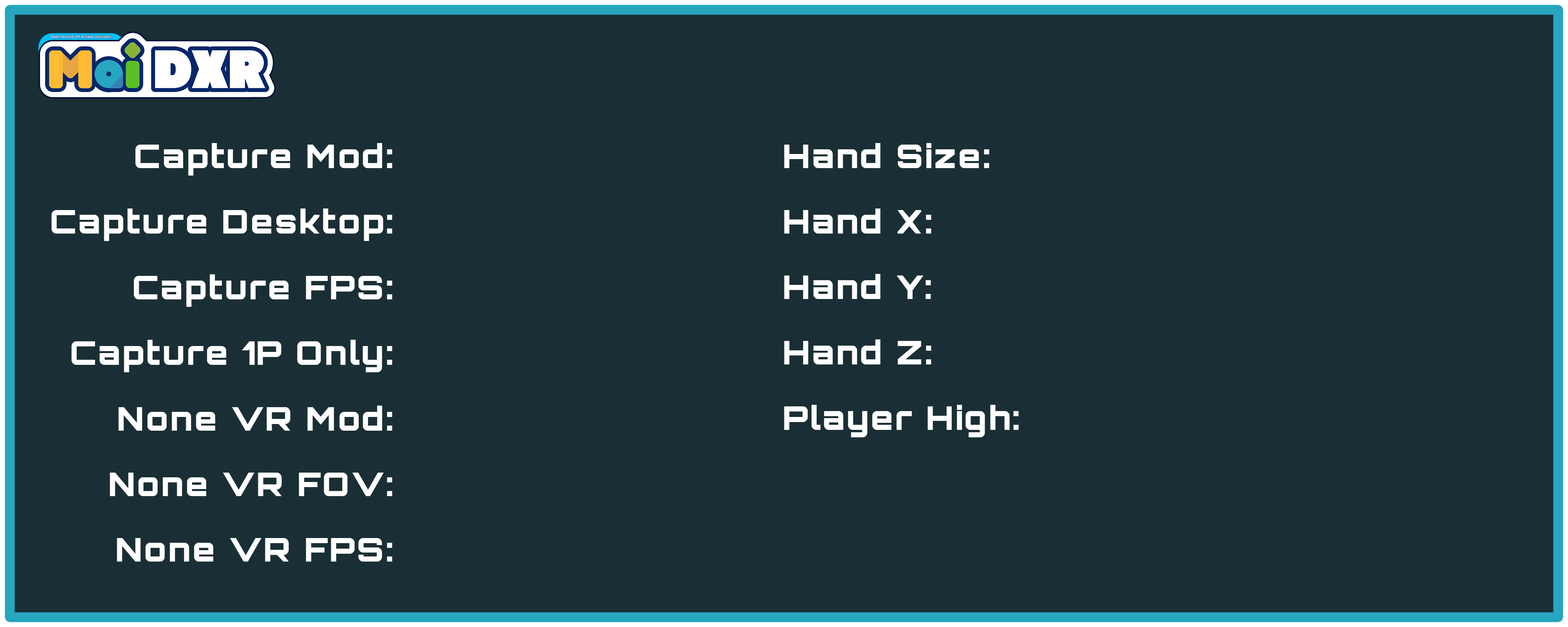
<style>
.page{position:relative;width:1568px;height:627px;background:#1a2f35}
.page>*{position:absolute;margin:0}
.t1{font:32.7px "Orbitron-Black";letter-spacing:0.05em;color:#ffffff}
</style>
<div class="page">
<p class="t1" style="left:135px;top:143px;width:257px;height:33px">Capture Mod:</p>
<p class="t1" style="left:784px;top:143px;width:205px;height:25px">Hand Size:</p>
<p class="t1" style="left:51px;top:209px;width:341px;height:32px">Capture Desktop:</p>
<p class="t1" style="left:784px;top:209px;width:147px;height:25px">Hand X:</p>
<p class="t1" style="left:134px;top:274px;width:258px;height:33px">Capture FPS:</p>
<p class="t1" style="left:784px;top:274px;width:147px;height:25px">Hand Y:</p>
<p class="t1" style="left:71px;top:340px;width:321px;height:32px">Capture 1P Only:</p>
<p class="t1" style="left:784px;top:339px;width:147px;height:26px">Hand Z:</p>
<p class="t1" style="left:118px;top:406px;width:274px;height:25px">None VR Mod:</p>
<p class="t1" style="left:784px;top:405px;width:235px;height:32px">Player High:</p>
<p class="t1" style="left:110px;top:473px;width:282px;height:23px">None VR FOV:</p>
<p class="t1" style="left:117px;top:538px;width:275px;height:24px">None VR FPS:</p>
</div>
